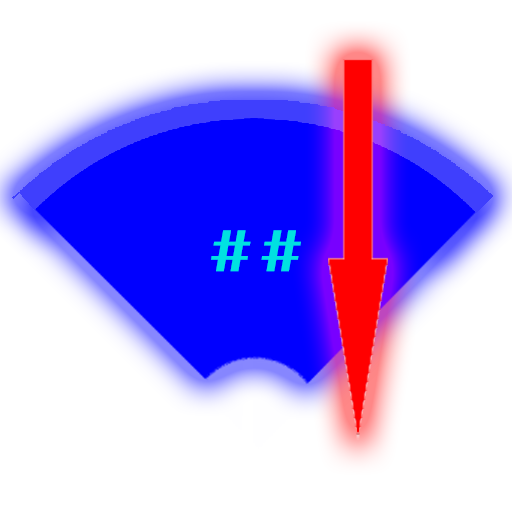
<style>
.page{position:relative;width:512px;height:512px;background:#ffffff}
.page>*{position:absolute;margin:0}
.t1{font:69.4px "BritannicBold";color:#00e1e1}
</style>
<div class="page">
<p class="t1" style="left:211px;top:230px;width:90px;height:42px">##</p>
</div>
